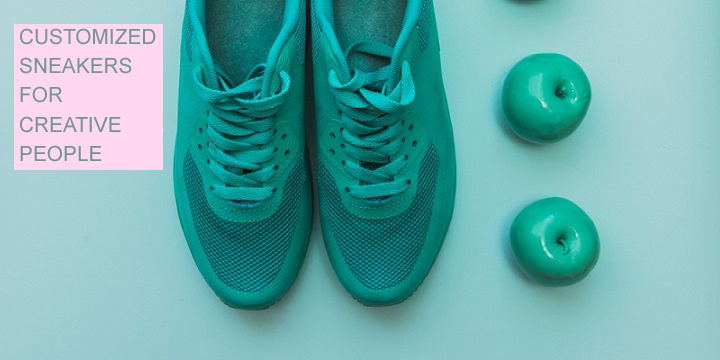
<style>
.page{position:relative;width:720px;height:360px}
.page>*{position:absolute;margin:0}
.t1{font:20.8px/29.2px "ArialMT";color:#779395;text-transform:uppercase}
</style>
<div class="page">
<p class="t1" style="left:20px;top:28px;width:136px;height:134px">customized <br>sneakers <br>for<br>creative <br>people</p>
</div>
